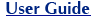
<style>
.page{position:relative;width:96px;height:19px;background:#ffffff}
.page>*{position:absolute;margin:0}
.t1{font:17px "CGOmega-Bold";color:#002582}
</style>
<div class="page">
<p class="t1" style="left:6px;top:1px;width:84px;height:13px">User Guide</p>
</div>
